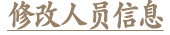
<style>
.page{position:relative;width:170px;height:35px;background:#ffffff}
.page>*{position:absolute;margin:0}
.t1{font:32px "STKaiti-SC-Black";letter-spacing:-0.05em;color:#978169;text-decoration:underline;scale:0.86 1}
</style>
<div class="page">
<p class="t1" style="left:7px;top:0px;width:157px;height:31px">修改人员信息</p>
</div>
